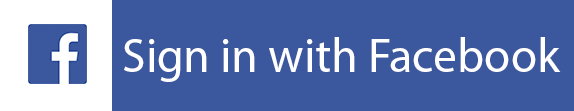
<style>
.page{position:relative;width:574px;height:111px;background:#3b579d}
.page>*{position:absolute;margin:0}
.t1{font:48px "MyriadPro-Regular";color:#ffffff}
</style>
<div class="page">
<p class="t1" style="left:124px;top:37px;width:437px;height:45px">Sign in with Facebook</p>
</div>
